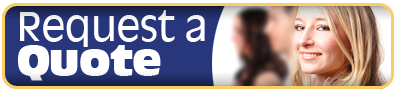
<style>
.page{position:relative;width:400px;height:95px;background:#ffffff}
.page>*{position:absolute;margin:0}
.t1{font:39px/26.1px "AntiqueOlive";letter-spacing:-0.02em;color:#ffffff}
.t2{font:39px/32.1px "AntiqueOliveCompact-Regular";letter-spacing:-0.02em;color:#ffffff}
</style>
<div class="page">
<p class="t1" style="left:17px;top:10px;width:188px;height:71px">Request a <br><span class="t2">Quote</span></p>
</div>
